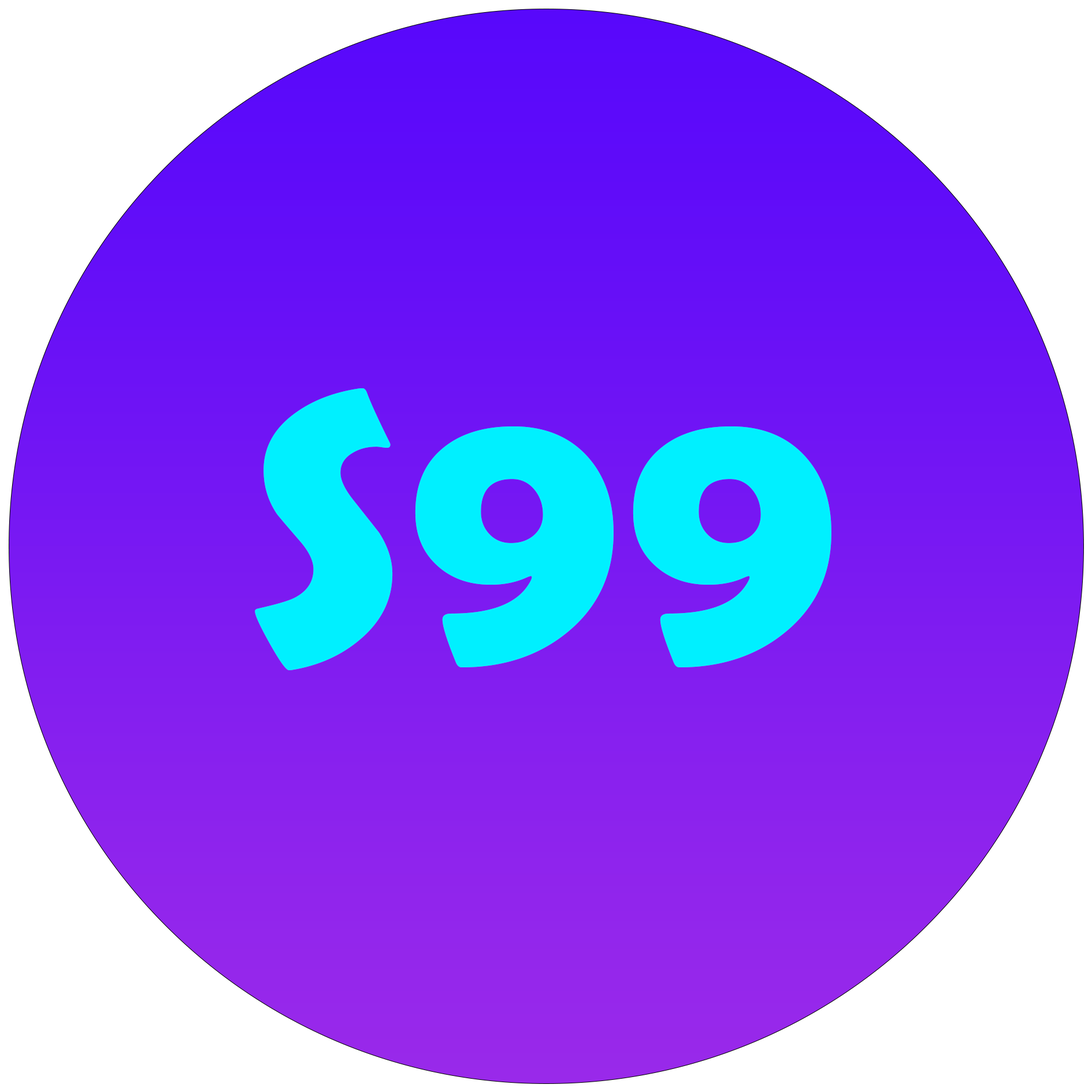
<style>
.page{position:relative;width:1092px;height:1092px;background:#ffffff}
.page>*{position:absolute;margin:0}
.t1{font:385.2px "BerlinSansFBDemi-Bold";color:#00f0ff}
</style>
<div class="page">
<p class="t1" style="left:255px;top:388px;width:576px;height:282px">S99</p>
</div>
